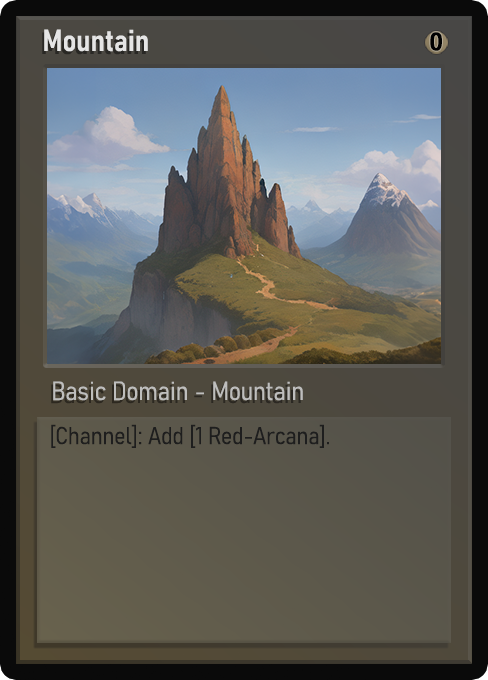
<style>
.page{position:relative;width:488px;height:680px}
.page>*{position:absolute;margin:0}
.t1{font:30px "Bahnschrift-SemiBoldSemiCondensed";color:#f2f2f2;font-weight:bold}
.t2{font:25px "WTRRoycroft";color:#000000;font-weight:bold;scale:1.09 1}
.t3{font:26px "Bahnschrift-LightSemiCondensed";color:#c8c8c8;font-weight:bold}
.t4{font:24px "Bahnschrift-LightSemiCondensed";color:#1e1e1e;font-weight:bold}
</style>
<div class="page">
<p class="t1" style="left:44px;top:29px;width:104px;height:23px;opacity:0.9">Mountain</p>
<p class="t2" style="left:430px;top:32px;width:12px;height:19px">0</p>
<p class="t3" style="left:53px;top:381px;width:250px;height:20px;opacity:0.9">Basic Domain - Mountain</p>
<p class="t4" style="left:51px;top:424px;width:278px;height:24px">[Channel]: Add [1 Red-Arcana].</p>
</div>
